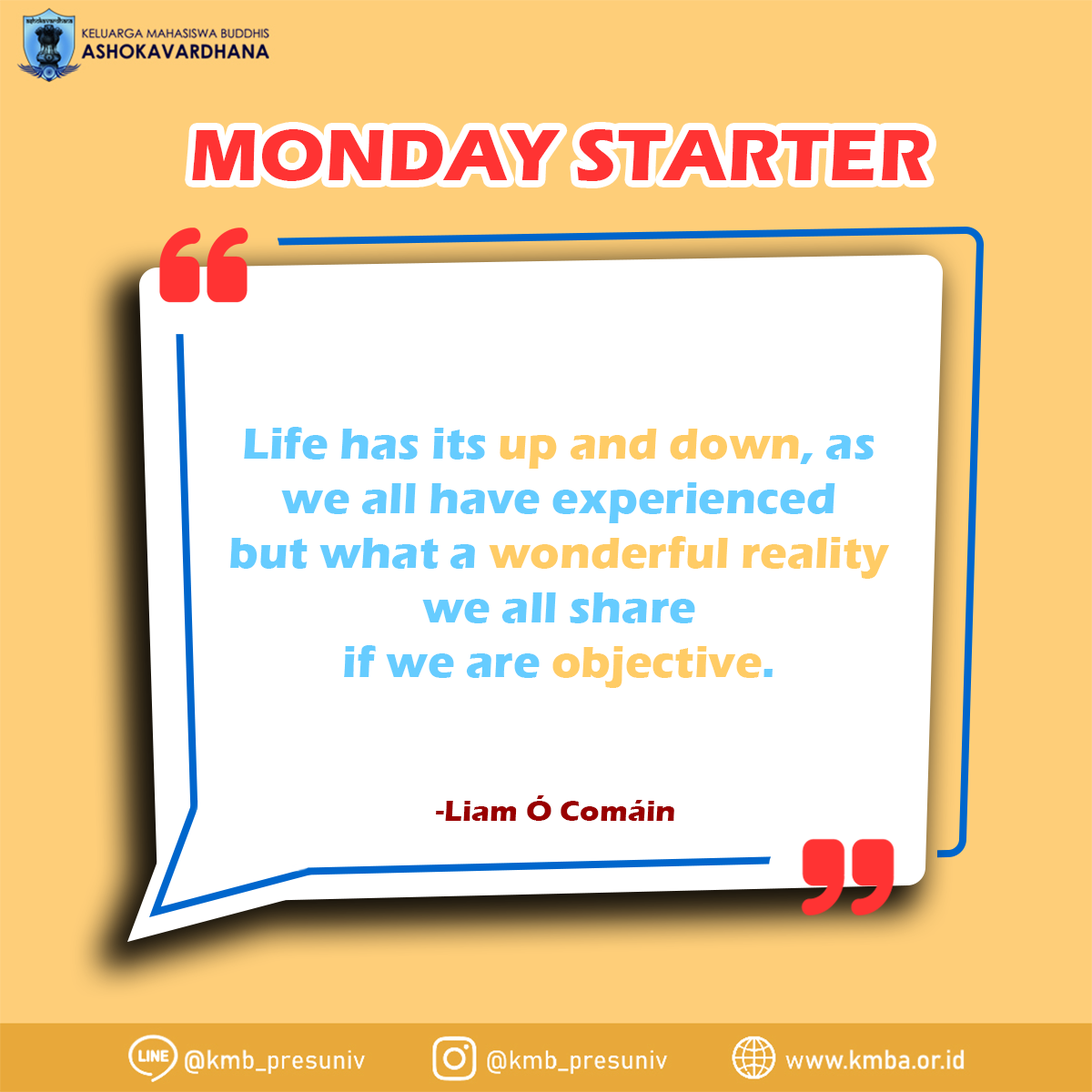
<style>
.page{position:relative;width:1092px;height:1092px;background:#ffffff}
.page>*{position:absolute;margin:0}
.t1{font:75.8px "ErasITC-Bold";color:#ff3333}
.t2{font:45.5px "ErasITC-Bold";color:#66ccff}
.t3{font:37.9px "ErasITC-Bold";color:#ff3333}
.t4{font:45.5px "ErasITC-Bold";color:#ffcc66}
.t5{font:30.3px "ErasITC-Bold";color:#990000}
</style>
<div class="page">
<p class="t1" style="left:192px;top:129px;width:737px;height:52px">MONDAY STARTER</p>
<p class="t2" style="left:230px;top:427px;width:660px;height:261px"><span class="t3"><br></span>Life has its <span class="t4">up and down</span>, as <br>we all have experienced <br>but what a <span class="t4">wonderful reality</span> <br>we all share <br>if we are <span class="t4">objective</span>.</p>
<p class="t5" style="left:436px;top:795px;width:238px;height:26px">-Liam Ó Comáin</p>
</div>
